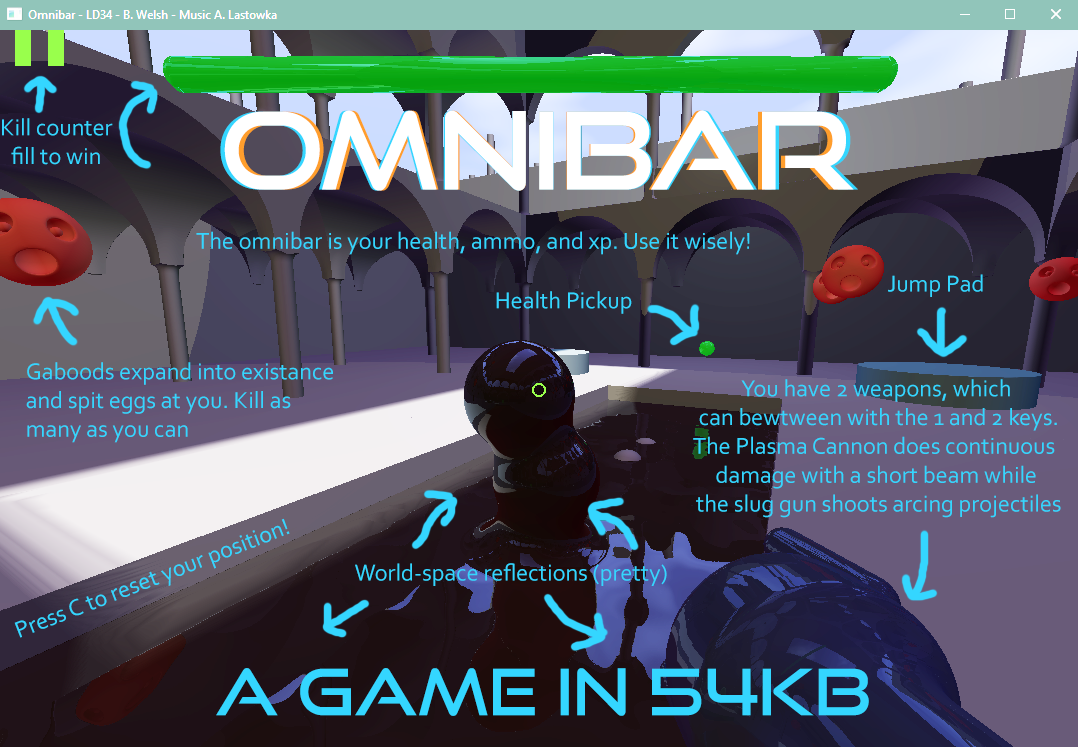
<style>
.page{position:relative;width:1078px;height:747px}
.page>*{position:absolute;margin:0}
.t1{font:106.7px "GoodTimesRg-Regular";color:#ffffff}
.t2{font:24px "Corbel";color:#34d6ff}
.t3{font:64px "GoodTimesRg-Regular";color:#34d6ff}
</style>
<div class="page">
<p class="t1" style="left:220px;top:110px;width:638px;height:81px">Omnibar</p>
<p class="t1" style="left:224px;top:110px;width:630px;height:81px">Omnibar</p>
<p class="t1" style="left:230px;top:110px;width:618px;height:81px">Omnibar</p>
<p class="t2" style="left:2px;top:118px;width:111px;height:47px;text-align:center">Kill counter<br>fill to win</p>
<p class="t2" style="left:196px;top:231px;width:554px;height:24px">The omnibar is your health, ammo, and xp. Use it wisely!</p>
<p class="t2" style="left:888px;top:274px;width:95px;height:23px">Jump Pad</p>
<p class="t2" style="left:496px;top:291px;width:136px;height:23px">Health Pickup</p>
<p class="t2" style="left:26px;top:362px;width:307px;height:81px">Gaboods expand into existance <br>and spit eggs at you. Kill as <br>many as you can</p>
<p class="t2" style="left:693px;top:379px;width:368px;height:139px;text-align:center">You have 2 weapons, which<br> can bewtween with the 1 and 2 keys.<br>The Plasma Cannon does continuous <br>damage with a short beam while<br> the slug gun shoots arcing projectiles</p>
<p class="t2" style="left:355px;top:563px;width:312px;height:23px">World-space reflections (pretty)</p>
<p class="t3" style="left:216px;top:668px;width:653px;height:48px">A game in 54kb</p>
</div>
